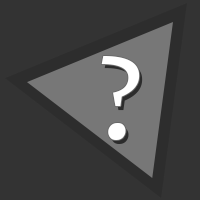
<style>
.page{position:relative;width:200px;height:200px;background:#333333}
.page>*{position:absolute;margin:0}
.t1{font:128.6px "Candara";letter-spacing:-0.02em;color:#ffffff}
</style>
<div class="page">
<p class="t1" style="left:101px;top:56px;width:39px;height:84px">?</p>
</div>
